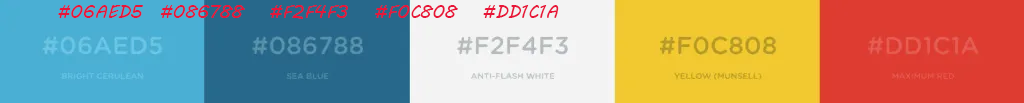
<style>
.page{position:relative;width:1024px;height:103px}
.page>*{position:absolute;margin:0}
.t1{font:18px "MVBoli";color:#e81538}
</style>
<div class="page">
<p class="t1" style="left:58px;top:5px;width:501px;height:14px">#06AED5  #086788   #F2F4F3   #F0C808   #DD1C1A</p>
</div>
